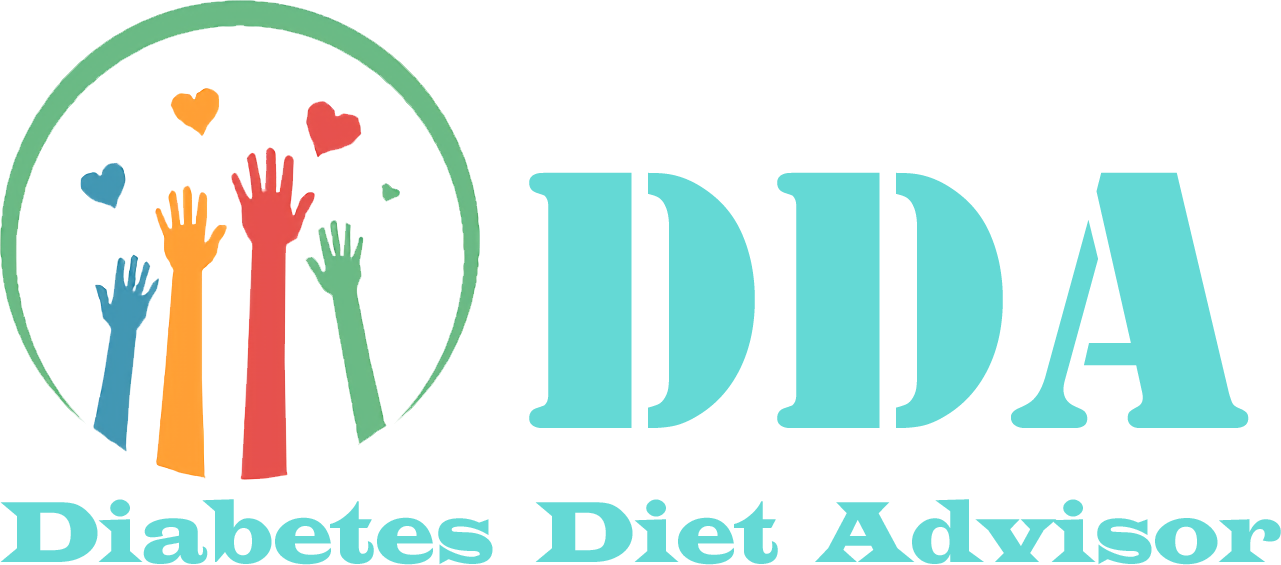
<style>
.page{position:relative;width:1281px;height:565px;background:#ffffff}
.page>*{position:absolute;margin:0}
.t1{font:383.3px "Stencil";color:#64d9d5}
.t2{font:89.6px "LatinWide";color:#64d9d5;scale:0.75 1}
</style>
<div class="page">
<p class="t1" style="left:529px;top:172px;width:720px;height:256px">DDA</p>
<p class="t2" style="left:0px;top:499px;width:1281px;height:66px">Diabetes  Diet  Advisor</p>
</div>
